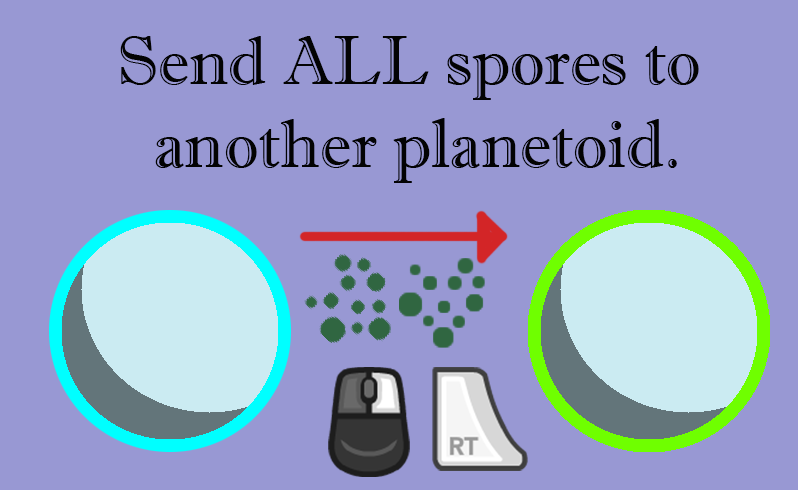
<style>
.page{position:relative;width:798px;height:490px;background:#9898d3}
.page>*{position:absolute;margin:0}
.t1{font:68.7px "ImprintMT-Shadow";color:#030303}
</style>
<div class="page">
<p class="t1" style="left:120px;top:36px;width:579px;height:147px;text-align:center">Send ALL spores to <br>another planetoid.</p>
</div>
